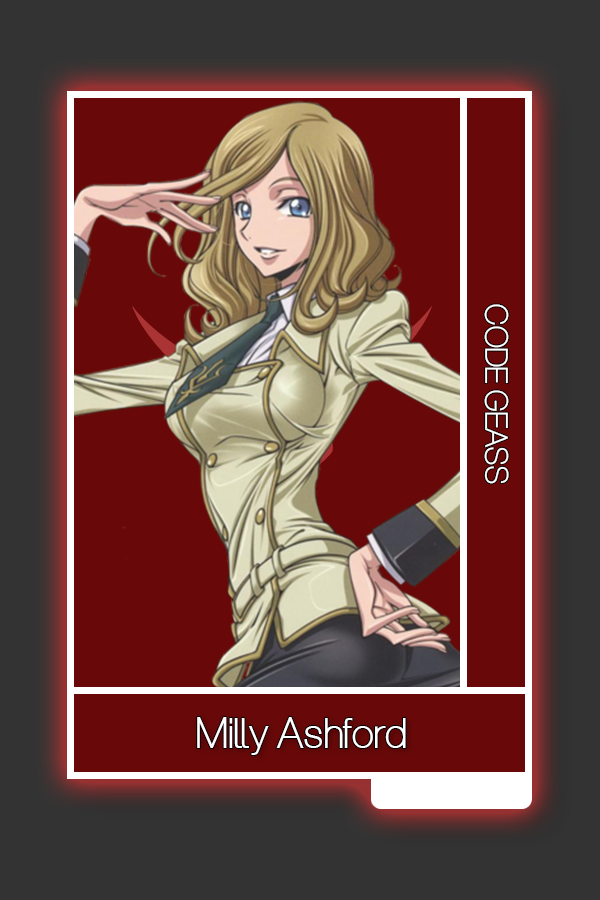
<style>
.page{position:relative;width:600px;height:900px;background:#680808}
.page>*{position:absolute;margin:0}
.t1{font:31.2px "Aliquam";color:#ffffff}
.t2{font:43.2px "Aliquam";color:#ffffff}
</style>
<div class="page">
<p class="t1" style="left:484px;top:304px;width:25px;height:180px;rotate:90deg">CODE GEASS</p>
<p class="t2" style="left:197px;top:717px;width:209px;height:38px">Milly Ashford</p>
</div>
